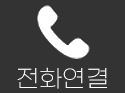
<style>
.page{position:relative;width:125px;height:93px;background:#333333}
.page>*{position:absolute;margin:0}
.t1{font:24px "GmarketSansLight";color:#ffffff}
</style>
<div class="page">
<p class="t1" style="left:17px;top:67px;width:90px;height:22px">전화연결</p>
</div>
